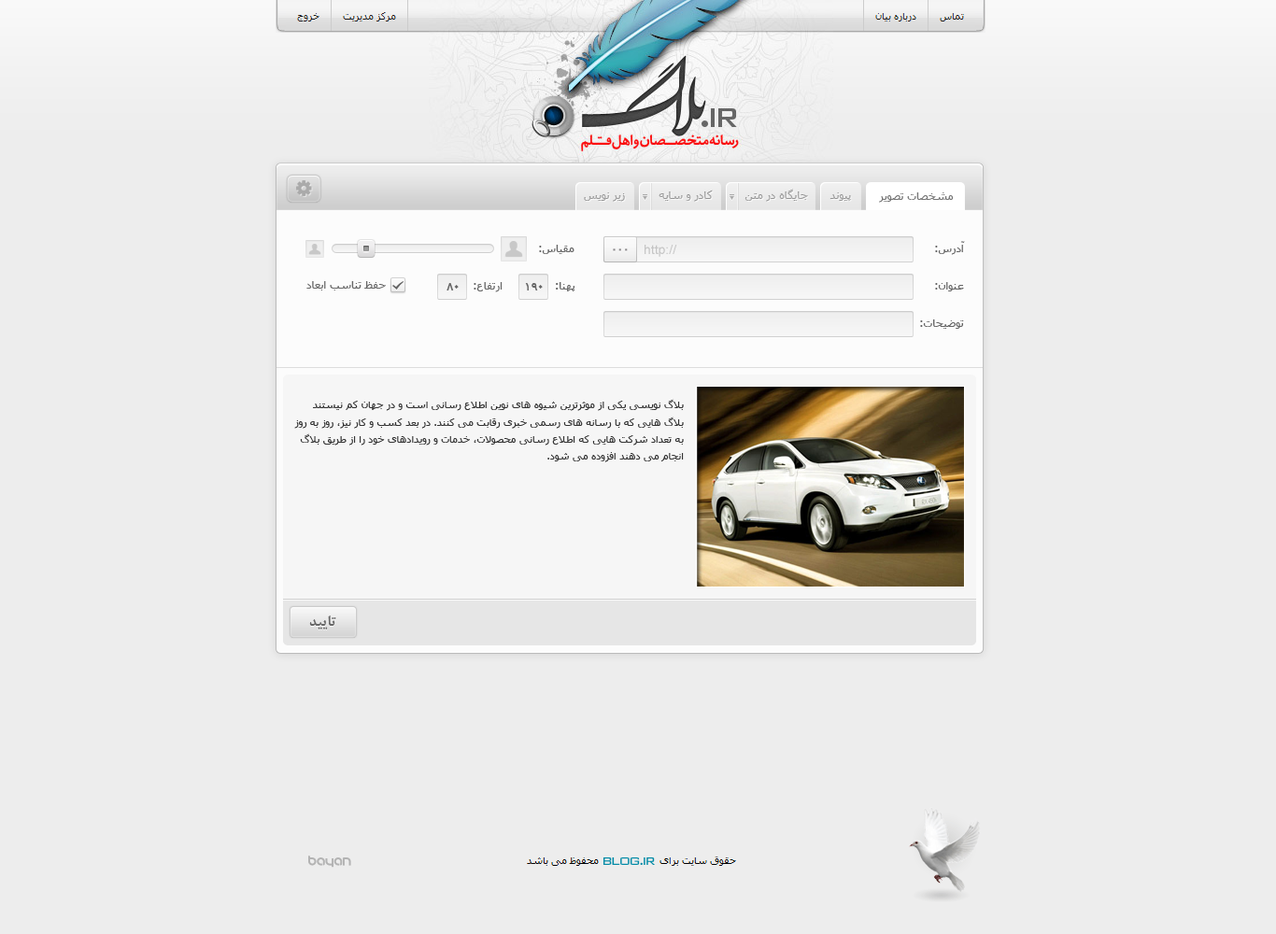
<style>
.page{position:relative;width:1276px;height:934px;background:#ededed}
.page>*{position:absolute;margin:0}
.t1{font:11.2px "Tahoma";color:#aaaaaa}
.t2{font:11.2px "Tahoma";color:#777777}
.t3{font:11.2px "Tahoma";color:#666666}
.t4{font:13.1px "ArialMT";color:#c5c5c5}
.t5{font:21.5px "ArialMT";color:#888688}
.t6{font:10.3px "Tahoma-Bold";color:#666666}
.t7{font:10.3px/17px "Tahoma";color:#333333}
.t8{font:15.9px "BNazaninBold";color:#666666}
</style>
<div class="page">
<p class="t1" style="left:584px;top:192px;width:41px;height:10px">زیر نویس</p>
<p class="t1" style="left:659px;top:190px;width:54px;height:12px">کادر و سایه</p>
<p class="t1" style="left:745px;top:189px;width:63px;height:13px">جایگاه در متن</p>
<p class="t1" style="left:830px;top:192px;width:21px;height:9px">پیوند</p>
<p class="t2" style="left:879px;top:192px;width:75px;height:11px">مشخصات تصویر</p>
<p class="t3" style="left:539px;top:245px;width:36px;height:9px">مقیاس:</p>
<p class="t4" style="left:645px;top:245px;width:32px;height:12px">//:http</p>
<p class="t3" style="left:935px;top:241px;width:30px;height:14px">آدرس:</p>
<p class="t5" style="left:613px;top:249px;width:15px;height:2px">...</p>
<p class="t3" style="left:306px;top:281px;width:80px;height:10px">حفظ تناسب ابعاد</p>
<p class="t6" style="left:447px;top:283px;width:12px;height:8px">80</p>
<p class="t3" style="left:474px;top:282px;width:29px;height:10px">ارتفاع:</p>
<p class="t6" style="left:525px;top:283px;width:18px;height:8px">190</p>
<p class="t3" style="left:556px;top:282px;width:20px;height:10px">پهنا:</p>
<p class="t3" style="left:935px;top:282px;width:29px;height:10px">عنوان:</p>
<p class="t3" style="left:920px;top:320px;width:44px;height:9px">توضیحات:</p>
<p class="t7" style="left:294px;top:399px;width:390px;height:63px">بلاگ نویسی یکی از موثرترین شیوه های نوین اطلاع رسانی است و در جهان کم نیستند بلاگ هایی که با رسانه های رسمی خبری رقابت می کنند. در بعد کسب و کار نیز، روز به روز به تعداد شرکت هایی که اطلاع رسانی محصولات، خدمات و رویدادهای خود را از طریق بلاگ انجام می دهند افزوده می شود.</p>
<p class="t8" style="left:309px;top:616px;width:27px;height:14px">تایید</p>
</div>
